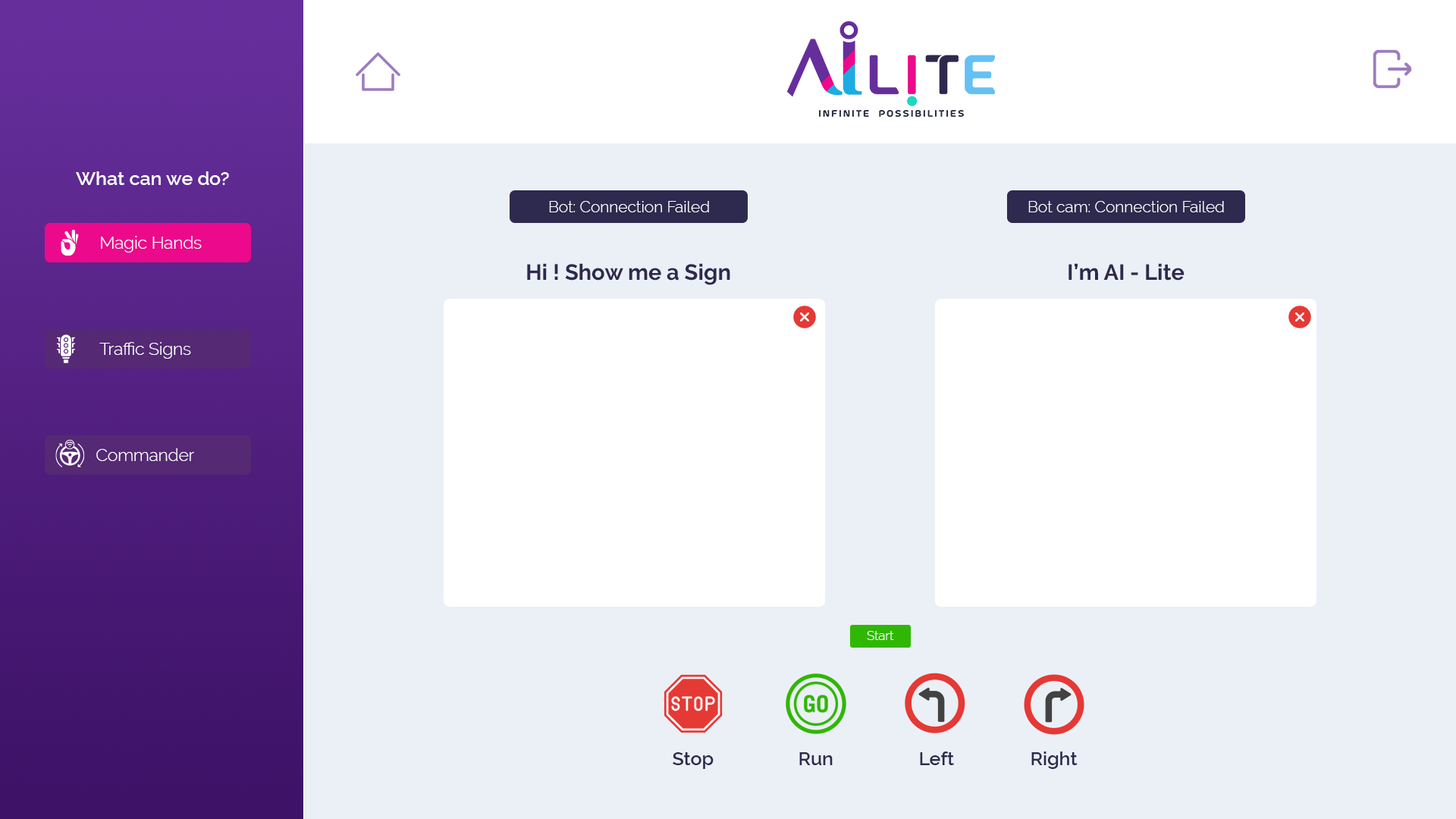
<style>
.page{position:relative;width:1456px;height:819px;background:#ebf0f6}
.page>*{position:absolute;margin:0}
.t1{font:19px "Raleway-SemiBold";color:#ffffff}
.t2{font:15.8px "Raleway-Light";color:#ffffff}
.t3{font:17.1px "Raleway-Light";color:#ffffff}
.t4{font:22px "Raleway-Bold";color:#2e294e}
.t5{font:12.6px "Raleway-Light";color:#ffffff}
.t6{font:18.8px "Raleway-SemiBold";color:#2e294e}
</style>
<div class="page">
<p class="t1" style="left:76px;top:171px;width:153px;height:14px">What can we do?</p>
<p class="t2" style="left:549px;top:201px;width:160px;height:11px">Bot: Connection Failed</p>
<p class="t2" style="left:1028px;top:201px;width:196px;height:11px">Bot cam: Connection Failed</p>
<p class="t3" style="left:101px;top:236px;width:101px;height:17px">Magic Hands</p>
<p class="t4" style="left:527px;top:263px;width:203px;height:22px">Hi ! Show me a Sign</p>
<p class="t4" style="left:1068px;top:263px;width:117px;height:18px">I’m AI - Lite</p>
<p class="t3" style="left:99px;top:342px;width:92px;height:17px">Traffic Signs</p>
<p class="t3" style="left:96px;top:448px;width:98px;height:13px">Commander</p>
<p class="t5" style="left:867px;top:631px;width:27px;height:9px">Start</p>
<p class="t6" style="left:673px;top:752px;width:41px;height:17px">Stop</p>
<p class="t6" style="left:799px;top:752px;width:34px;height:13px">Run</p>
<p class="t6" style="left:920px;top:751px;width:34px;height:14px">Left</p>
<p class="t6" style="left:1031px;top:751px;width:47px;height:18px">Right</p>
</div>
